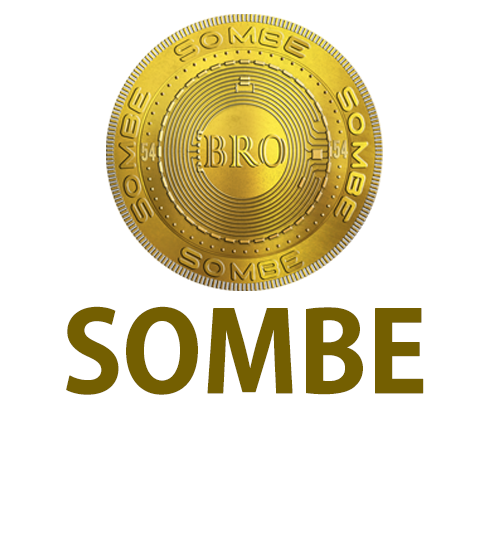
<style>
.page{position:relative;width:480px;height:550px;background:#ffffff}
.page>*{position:absolute;margin:0}
.t1{font:110px "AdobeGothicStd-Bold";letter-spacing:-0.025em;color:#745f01;font-weight:bold}
</style>
<div class="page">
<p class="t1" style="left:66px;top:306px;width:358px;height:89px">SOMBE</p>
</div>
